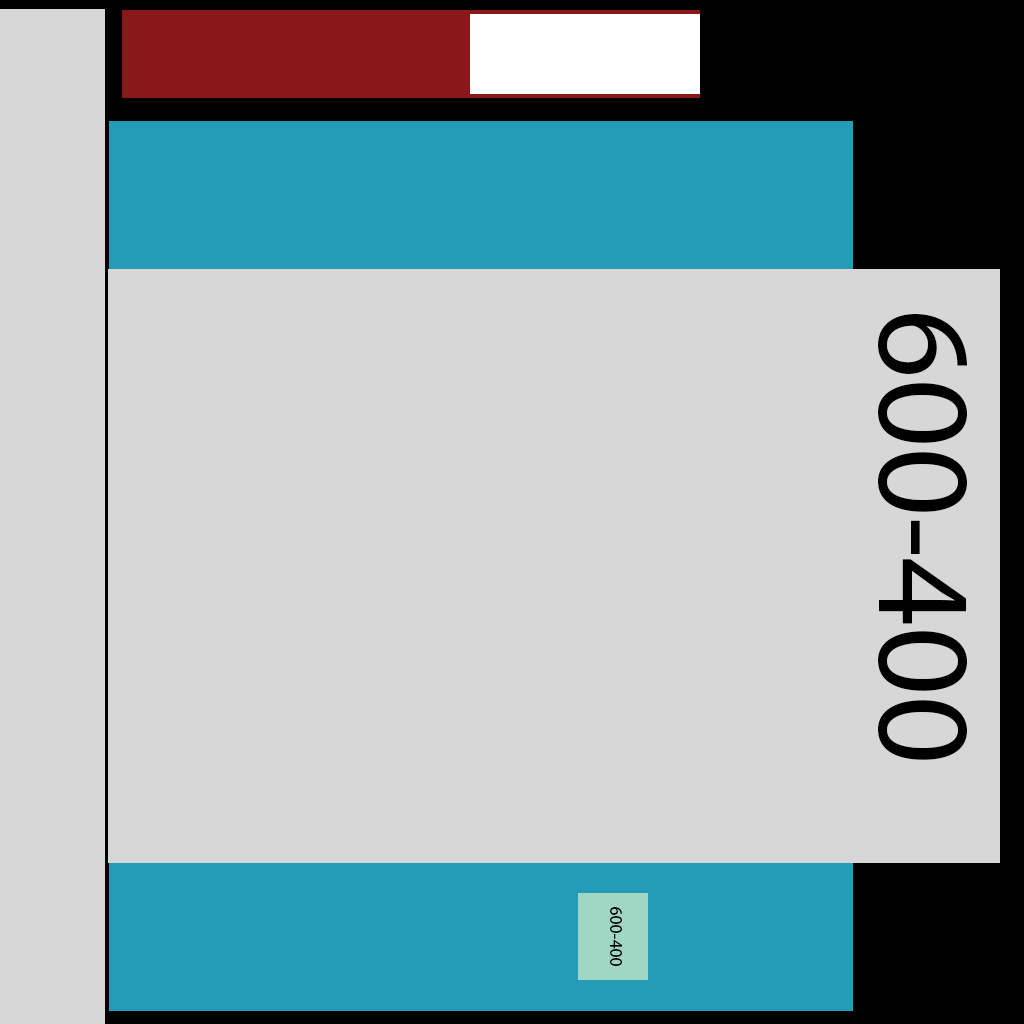
<style>
.page{position:relative;width:1024px;height:1024px;background:#d7d7d7}
.page>*{position:absolute;margin:0}
.t1{font:134.4px "MyriadPro-Regular";color:#000000}
.t2{font:18px "MyriadPro-Regular";color:#000000}
</style>
<div class="page">
<p class="t1" style="left:878px;top:314px;width:90px;height:446px;rotate:90deg">600-400</p>
<p class="t2" style="left:610px;top:907px;width:12px;height:59px;rotate:90deg">600-400</p>
</div>
